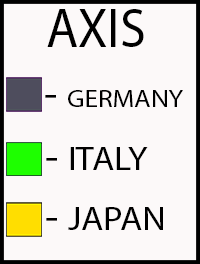
<style>
.page{position:relative;width:200px;height:264px;background:#fcf9f9}
.page>*{position:absolute;margin:0}
.t1{font:55px "MyriadPro-Regular";color:#000000;scale:0.95 1}
.t2{font:24.8px "MyriadPro-Regular";color:#000000;scale:1.1 1}
.t3{font:40px "MyriadPro-Regular";color:#000000;scale:1.1 1}
.t4{font:33px "MyriadPro-Regular";color:#000000;scale:1.1 1}
</style>
<div class="page">
<p class="t1" style="left:47px;top:9px;width:97px;height:38px">AXIS</p>
<p class="t2" style="left:45px;top:90px;width:138px;height:17px"><span class="t3">- </span>GERMANY</p>
<p class="t4" style="left:46px;top:147px;width:102px;height:23px"><span class="t3">- </span>ITALY</p>
<p class="t4" style="left:46px;top:207px;width:117px;height:23px"><span class="t3">- </span>JAPAN</p>
</div>
